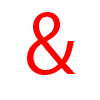
<style>
.page{position:relative;width:100px;height:100px;background:#ffffff}
.page>*{position:absolute;margin:0}
.t1{font:80px "KozGoPr6N-Regular";color:#ff0000}
</style>
<div class="page">
<p class="t1" style="left:27px;top:12px;width:49px;height:63px">&amp;</p>
</div>
